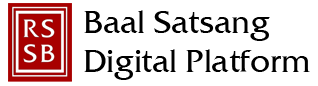
<style>
.page{position:relative;width:318px;height:86px;background:#ffffff}
.page>*{position:absolute;margin:0}
.t1{font:32.2px "FrizQua-ReguOS";letter-spacing:-0.01em;color:#000000}
</style>
<div class="page">
<p class="t1" style="left:84px;top:10px;width:226px;height:70px">Baal Satsang<br>Digital Platform</p>
</div>
